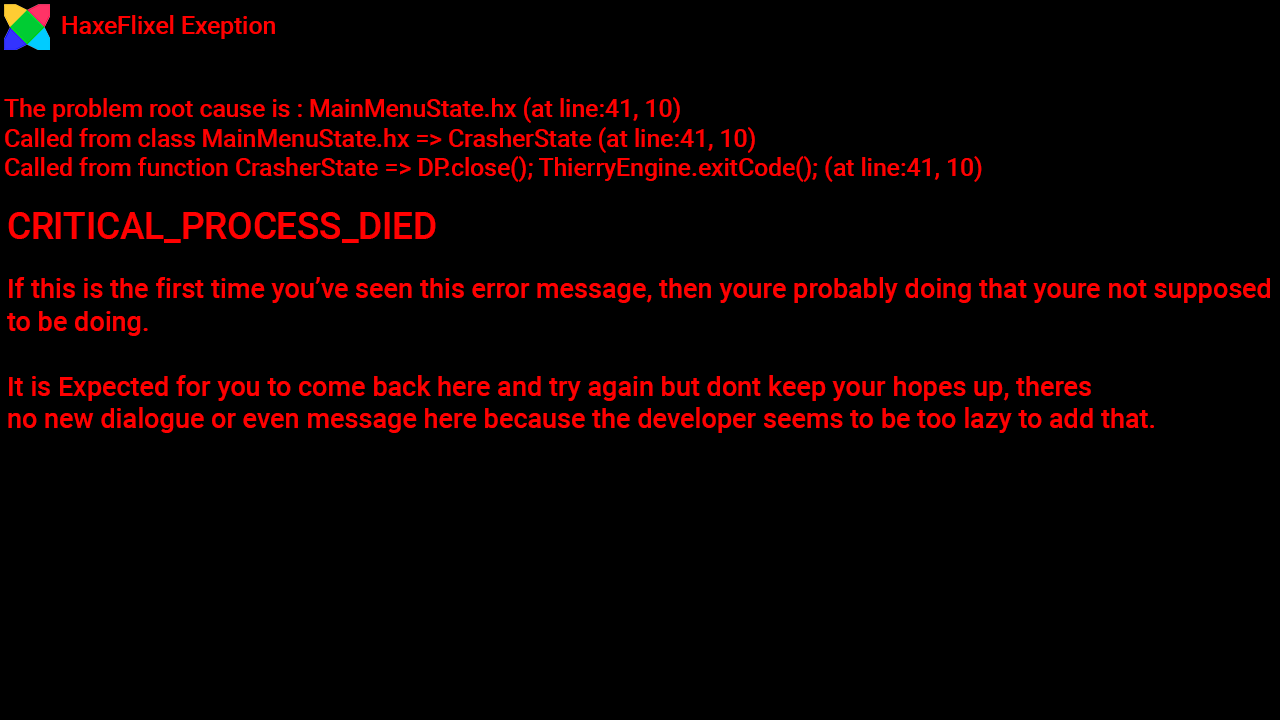
<style>
.page{position:relative;width:1280px;height:720px;background:#000000}
.page>*{position:absolute;margin:0}
.t1{font:24.6px "Roboto-Medium";color:#ff0000}
.t2{font:36.7px "Roboto-Medium";color:#ff0000}
.t3{font:27px "Roboto-Medium";color:#ff0000}
</style>
<div class="page">
<p class="t1" style="left:62px;top:15px;width:213px;height:24px">HaxeFlixel Exeption</p>
<p class="t1" style="left:4px;top:97px;width:978px;height:85px">The problem root cause is : MainMenuState.hx (at line:41, 10)<br>Called from class MainMenuState.hx =&gt; CrasherState (at line:41, 10)<br>Called from function CrasherState =&gt; DP.close(); ThierryEngine.exitCode(); (at line:41, 10)</p>
<p class="t2" style="left:8px;top:212px;width:428px;height:31px">CRITICAL_PROCESS_DIED</p>
<p class="t3" style="left:7px;top:277px;width:1263px;height:156px">If this is the first time you’ve seen this error message, then youre probably doing that youre not supposed<br>to be doing. <br><br>It is Expected for you to come back here and try again but dont keep your hopes up, theres<br>no new dialogue or even message here because the developer seems to be too lazy to add that.</p>
</div>
